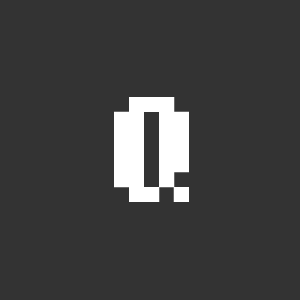
<style>
.page{position:relative;width:300px;height:300px;background:#333333}
.page>*{position:absolute;margin:0}
.t1{font:150px "Hardpixel";color:#ffffff}
</style>
<div class="page">
<p class="t1" style="left:114px;top:97px;width:75px;height:105px">Q</p>
</div>
